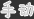
<style>
.page{position:relative;width:34px;height:19px;background:#333333}
.page>*{position:absolute;margin:0}
.t1{font:20px "¢è?";color:#cacaca}
</style>
<div class="page">
<p class="t1" style="left:1px;top:1px;width:33px;height:17px">手动</p>
</div>
